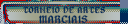
<style>
.page{position:relative;width:128px;height:24px}
.page>*{position:absolute;margin:0}
.t1{font:9px "Alagard";letter-spacing:0.02em;color:#002858}
.t2{font:11px "Alagard";letter-spacing:0.02em;color:#002858}
</style>
<div class="page">
<p class="t1" style="left:23px;top:6px;width:83px;height:8px">TORNEIO DE ARTES</p>
<p class="t2" style="left:39px;top:15px;width:49px;height:9px">MARCIAIS</p>
</div>
